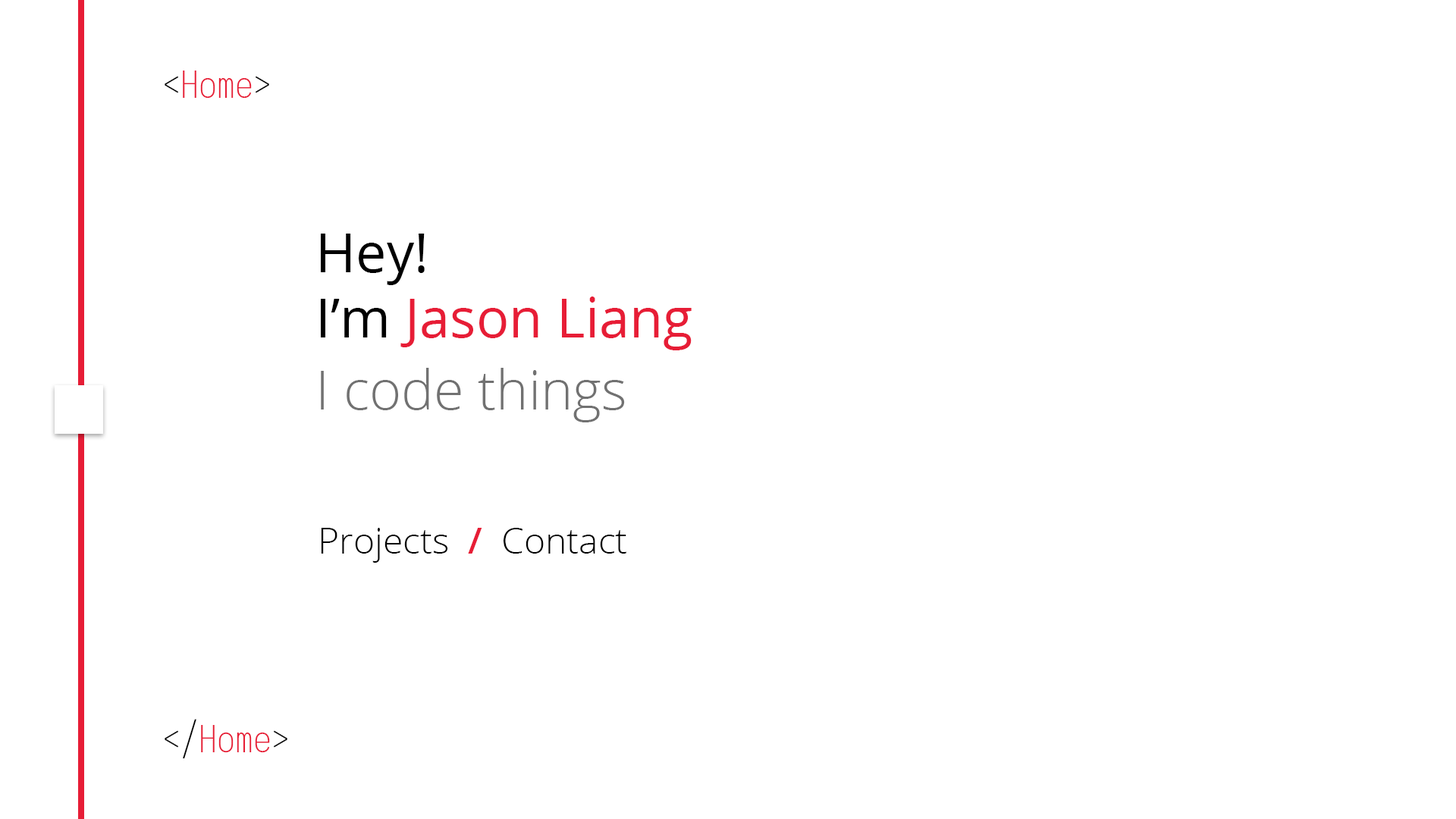
<style>
.page{position:relative;width:1456px;height:819px;background:#ffffff}
.page>*{position:absolute;margin:0}
.t1{font:36.4px "IosevkaNerdFontComplete-Extralight";color:#000000}
.t2{font:36.4px "IosevkaNerdFontComplete-Extralight";color:#e71d36}
.t3{font:54.6px "OpenSans-Regular";color:#e71d36}
.t4{font:54.6px "OpenSans-Regular";color:#000000}
.t5{font:54.6px "OpenSans-Light";color:#717171}
.t6{font:36.4px "OpenSans-Light";color:#000000}
.t7{font:36.4px "OpenSans-SemiBold";color:#e71d36}
</style>
<div class="page">
<p class="t1" style="left:165px;top:71px;width:122px;height:687px">&lt;<span class="t2">Home</span>&gt;<br><br><br><br><br><br><br><br><br><br><br><br><br><br> <br>&lt;/<span class="t2">Home</span>&gt;</p>
<p class="t3" style="left:321px;top:234px;width:371px;height:116px"><span class="t4">Hey!<br>I’m </span>Jason Liang</p>
<p class="t5" style="left:321px;top:368px;width:304px;height:54px">I code things</p>
<p class="t6" style="left:321px;top:528px;width:305px;height:35px">Projects  <span class="t7">/</span>  Contact</p>
</div>
